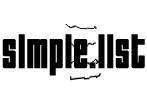
<style>
.page{position:relative;width:147px;height:100px;background:#ffffff}
.page>*{position:absolute;margin:0}
.t1{font:48px "Faltura";letter-spacing:0.02em;color:#000000;font-weight:bold}
</style>
<div class="page">
<p class="t1" style="left:2px;top:34px;width:143px;height:42px">simple.list</p>
</div>
